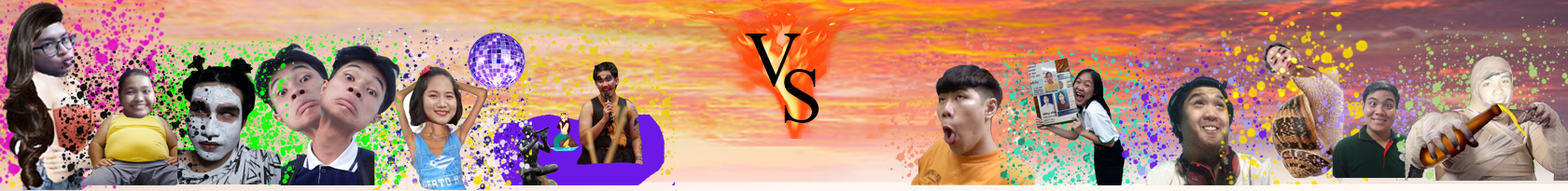
<style>
.page{position:relative;width:1568px;height:191px}
.page>*{position:absolute;margin:0}
.t1{font:118.5px "AngsanaNew";color:#000000}
</style>
<div class="page">
<p class="t1" style="left:745px;top:34px;width:56px;height:53px">V</p>
<p class="t1" style="left:784px;top:69px;width:35px;height:54px">S</p>
</div>
